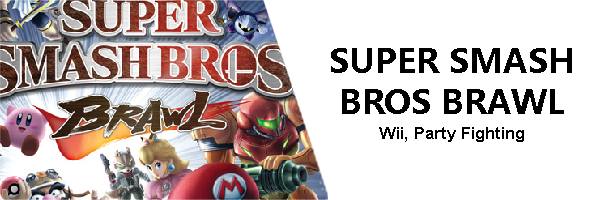
<style>
.page{position:relative;width:600px;height:200px;background:#ffffff}
.page>*{position:absolute;margin:0}
.t1{font:33.3px/41.7px "MicrosoftYaHei-Bold";color:#000000}
.t2{font:16.7px/25px "Arial-BoldMT";color:#000000}
</style>
<div class="page">
<p class="t1" style="left:331px;top:48px;width:241px;height:94px;text-align:center">SUPER SMASH BROS BRAWL<br><span class="t2">Wii, Party Fighting</span></p>
</div>
